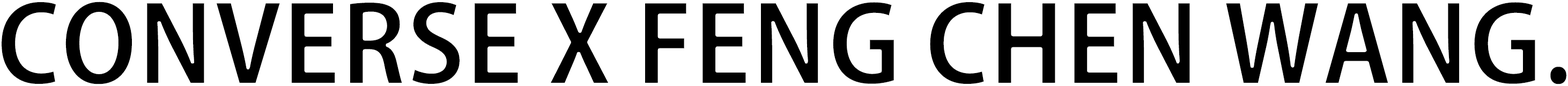
<style>
.page{position:relative;width:1568px;height:86px;background:#ffffff}
.page>*{position:absolute;margin:0}
.t1{font:107.3px "AdobeGothicStd-Bold";color:#000000}
</style>
<div class="page">
<p class="t1" style="left:0px;top:0px;width:1568px;height:86px">CONVERSE X FENG CHEN WANG.</p>
</div>
